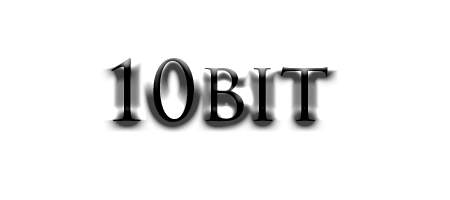
<style>
.page{position:relative;width:450px;height:200px;background:#ffffff}
.page>*{position:absolute;margin:0}
.t1{font:83.3px "TrajanPro-Regular";color:#000000}
</style>
<div class="page">
<p class="t1" style="left:111px;top:58px;width:217px;height:64px">10bit</p>
</div>
